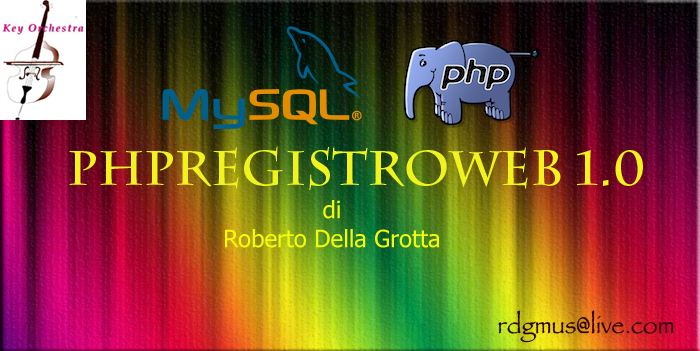
<style>
.page{position:relative;width:700px;height:351px}
.page>*{position:absolute;margin:0}
.t1{font:48px "CharlemagneStd-Bold";color:#f0f31c}
.t2{font:24px "Tahoma";color:#f3fb0c}
.t3{font:24px "Papyrus";color:#2a030a}
</style>
<div class="page">
<p class="t1" style="left:69px;top:146px;width:574px;height:44px">PhpRegistroWeb 1.0</p>
<p class="t2" style="left:225px;top:200px;width:214px;height:48px;text-align:center">di<br>Roberto Della Grotta</p>
<p class="t3" style="left:498px;top:310px;width:176px;height:33px">rdgmus@live.com</p>
</div>
